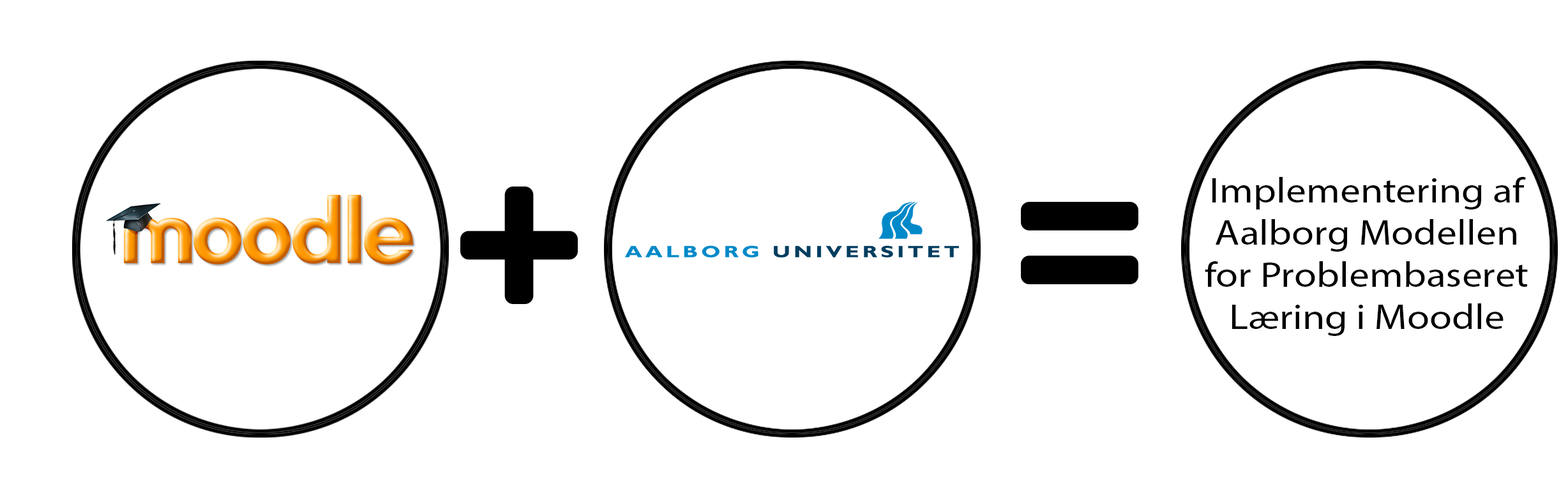
<style>
.page{position:relative;width:1568px;height:488px;background:#ffffff}
.page>*{position:absolute;margin:0}
.t1{font:35px "MyriadPro-Regular";color:#000000;scale:1.16 1}
</style>
<div class="page">
<p class="t1" style="left:1205px;top:177px;width:323px;height:159px;text-align:center">Implementering af<br>Aalborg Modellen<br>for Problembaseret<br>Læring i Moodle</p>
</div>
